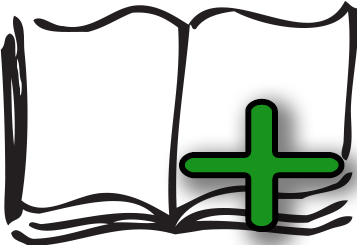
<style>
.page{position:relative;width:357px;height:245px;background:#ffffff}
.page>*{position:absolute;margin:0}
.t1{font:319.5px "OCRAExtended";scale:1.24 1}
</style>
<div class="page">
<p class="t1" style="left:179px;top:98px;width:166px;height:134px">+</p>
</div>
